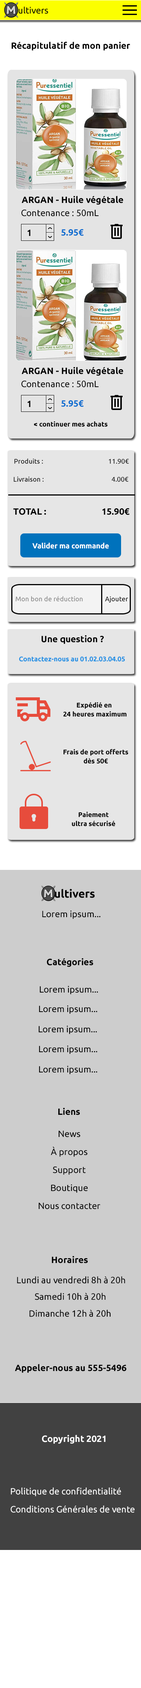
<style>
.page{position:relative;width:141px;height:1688px;background:#cdcdcd}
.page>*{position:absolute;margin:0}
.t1{font:9px "Ubuntu-Regular";color:#000000}
.t2{font:9px "Ubuntu-Bold";color:#000000}
.t3{font:9px "Ubuntu-Bold";color:#0f6ed0}
.t4{font:6.8px "Ubuntu-Bold";color:#000000}
.t5{font:6.8px/9px "Ubuntu-Regular";color:#000000}
.t6{font:6.8px "Ubuntu-Regular";color:#000000}
.t7{font:7.4px "Ubuntu-Bold";color:#ffffff}
.t8{font:6.8px "Ubuntu-Regular";color:#858585}
.t9{font:6.8px "Ubuntu-Bold";color:#218fe4}
.t10{font:6.8px/9px "Ubuntu-Bold";color:#000000}
.t11{font:11.2px "Ubuntu-Bold";color:#000000}
.t12{font:9px/9px "Ubuntu-Regular";color:#000000}
.t13{font:9px "Ubuntu-Bold";color:#ffffff}
.t14{font:9px/9px "Ubuntu-Regular";color:#ffffff}
</style>
<div class="page">
<p class="t1" style="left:10px;top:6px;width:38px;height:8px">Multivers</p>
<p class="t2" style="left:12px;top:42px;width:118px;height:9px">Récapitulatif de mon panier</p>
<p class="t2" style="left:21px;top:196px;width:102px;height:9px">ARGAN - Huile végétale</p>
<p class="t1" style="left:21px;top:209px;width:77px;height:7px">Contenance : 50mL</p>
<p class="t2" style="left:27px;top:230px;width:3px;height:6px">1</p>
<p class="t3" style="left:61px;top:229px;width:23px;height:7px">5.95€</p>
<p class="t2" style="left:21px;top:367px;width:102px;height:9px">ARGAN - Huile végétale</p>
<p class="t1" style="left:21px;top:380px;width:77px;height:7px">Contenance : 50mL</p>
<p class="t2" style="left:27px;top:400px;width:3px;height:7px">1</p>
<p class="t3" style="left:61px;top:400px;width:23px;height:7px">5.95€</p>
<p class="t4" style="left:34px;top:421px;width:73px;height:6px">&lt; continuer mes achats</p>
<p class="t5" style="left:14px;top:458px;width:30px;height:24px;text-align:center">Produits :<br><br>Livraison :</p>
<p class="t6" style="left:108px;top:459px;width:21px;height:5px">11.90€</p>
<p class="t6" style="left:111px;top:477px;width:17px;height:5px">4.00€</p>
<p class="t2" style="left:13px;top:508px;width:33px;height:7px">TOTAL :</p>
<p class="t2" style="left:102px;top:508px;width:27px;height:7px">15.90€</p>
<p class="t7" style="left:32px;top:542px;width:77px;height:7px">Valider ma commande</p>
<p class="t8" style="left:15px;top:596px;width:67px;height:5px">Mon bon de réduction</p>
<p class="t6" style="left:105px;top:596px;width:23px;height:7px">Ajouter</p>
<p class="t2" style="left:41px;top:635px;width:63px;height:9px">Une question ?</p>
<p class="t9" style="left:19px;top:656px;width:105px;height:6px">Contactez-nous au 01.02.03.04.05</p>
<p class="t10" style="left:63px;top:702px;width:63px;height:15px;text-align:center">Expédié en <br>24 heures maximum</p>
<p class="t10" style="left:63px;top:749px;width:65px;height:15px;text-align:center">Frais de port offerts<br>dès 50€</p>
<p class="t10" style="left:72px;top:812px;width:43px;height:14px;text-align:center">Paiement<br>ultra sécurisé</p>
<p class="t11" style="left:44px;top:888px;width:50px;height:10px">Multivers</p>
<p class="t1" style="left:42px;top:910px;width:58px;height:9px">Lorem ipsum...</p>
<p class="t2" style="left:46px;top:958px;width:47px;height:9px">Catégories</p>
<p class="t1" style="left:40px;top:986px;width:58px;height:8px">Lorem ipsum...</p>
<p class="t1" style="left:39px;top:1005px;width:58px;height:9px">Lorem ipsum...</p>
<p class="t1" style="left:39px;top:1025px;width:58px;height:9px">Lorem ipsum...</p>
<p class="t1" style="left:39px;top:1045px;width:58px;height:9px">Lorem ipsum...</p>
<p class="t1" style="left:39px;top:1065px;width:58px;height:9px">Lorem ipsum...</p>
<p class="t2" style="left:58px;top:1107px;width:22px;height:8px">Liens</p>
<p class="t12" style="left:39px;top:1130px;width:61px;height:79px;text-align:center">News<br><br>À propos<br><br>Support<br><br>Boutique<br><br>Nous contacter</p>
<p class="t2" style="left:52px;top:1256px;width:36px;height:7px">Horaires</p>
<p class="t1" style="left:17px;top:1276px;width:108px;height:7px">Lundi au vendredi 8h à 20h</p>
<p class="t1" style="left:34px;top:1292px;width:71px;height:8px">Samedi 10h à 20h</p>
<p class="t1" style="left:29px;top:1309px;width:81px;height:8px">Dimanche 12h à 20h</p>
<p class="t2" style="left:15px;top:1364px;width:111px;height:8px">Appeler-nous au 555-5496</p>
<p class="t13" style="left:42px;top:1434px;width:63px;height:9px">Copyright 2021</p>
<p class="t14" style="left:10px;top:1487px;width:124px;height:25px">Politique de confidentialité<br><br>Conditions Générales de vente</p>
</div>
